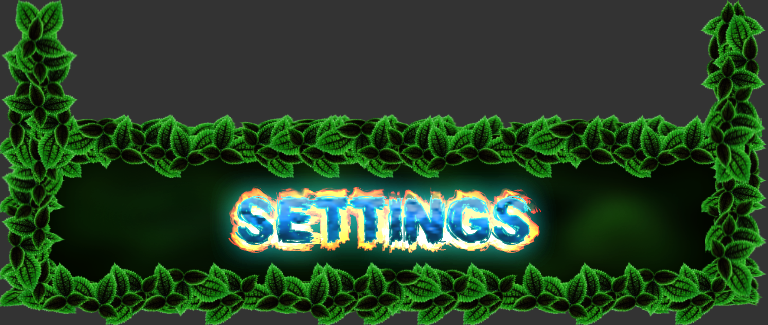
<style>
.page{position:relative;width:768px;height:325px;background:#333333}
.page>*{position:absolute;margin:0}
.t1{font:60px "SplinterWood";text-transform:uppercase}
</style>
<div class="page">
<p class="t1" style="left:235px;top:195px;width:296px;height:51px">SETTINGS</p>
<p class="t1" style="left:235px;top:195px;width:296px;height:51px">SETTINGS</p>
<p class="t1" style="left:235px;top:195px;width:296px;height:51px">SETTINGS</p>
</div>
